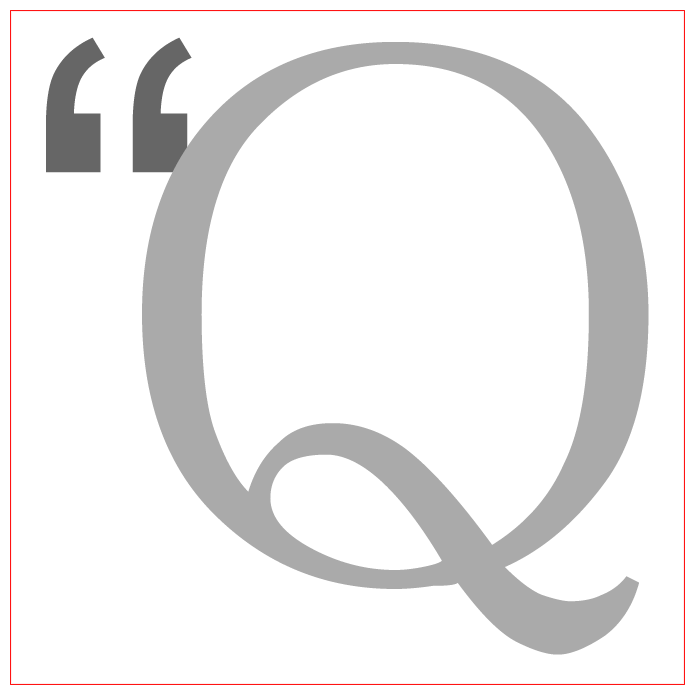
<style>
.page{position:relative;width:695px;height:695px;background:#ffffff}
.page>*{position:absolute;margin:0}
.t1{font:800px "Utsaah";color:#666666}
.t2{font:800px "MS-PMincho";color:#aaaaaa}
</style>
<div class="page">
<p class="t1" style="left:46px;top:37px;width:146px;height:136px">“</p>
<p class="t2" style="left:142px;top:42px;width:507px;height:613px">Q</p>
</div>
